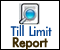
<style>
.page{position:relative;width:60px;height:50px;background:#ffffff}
.page>*{position:absolute;margin:0}
.t1{font:18px "PSLxKittithada-Bold";color:#094692}
.t2{font:18px "PSLxKittithada-Bold";color:#3d2b03;font-weight:bold}
</style>
<div class="page">
<p class="t1" style="left:10px;top:25px;width:42px;height:11px">Till Limit</p>
<p class="t2" style="left:12px;top:37px;width:36px;height:14px">Report</p>
</div>
